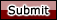
<style>
.page{position:relative;width:57px;height:20px}
.page>*{position:absolute;margin:0}
.t1{font:11px "Verdana";letter-spacing:-0.005em;color:#000000;font-weight:bold}
</style>
<div class="page">
<p class="t1" style="left:8px;top:5px;width:41px;height:10px">Submit</p>
</div>
